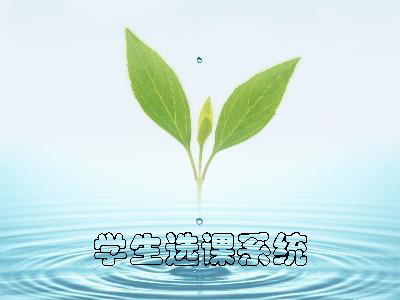
<style>
.page{position:relative;width:400px;height:300px}
.page>*{position:absolute;margin:0}
.t1{font:36px "STCaiyun";color:#08080c}
</style>
<div class="page">
<p class="t1" style="left:94px;top:232px;width:213px;height:34px">学生选课系统</p>
</div>
